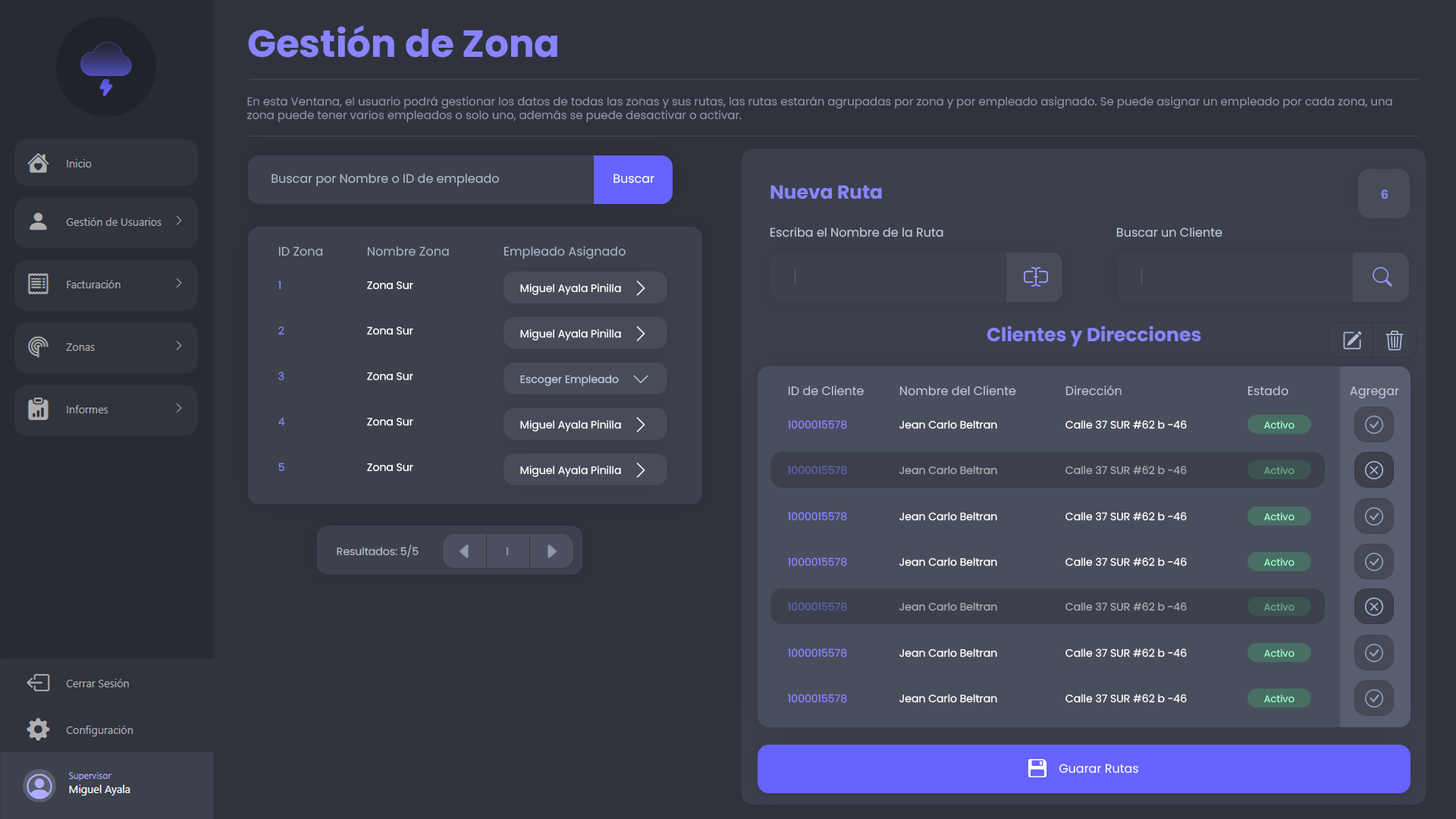
<style>
.page{position:relative;width:1456px;height:819px;background:#30333c}
.page>*{position:absolute;margin:0}
.t1{font:37.9px "Poppins-Bold";color:#8885fe}
.t2{font:11.4px "Poppins-Regular";color:#8c92a6}
.t3{font:12.1px "Poppins-Regular";color:#aeb5c8}
.t4{font:12.1px "Poppins-Regular";color:#ffffff}
.t5{font:19px "Poppins-Bold";color:#8785ff}
.t6{font:12.1px "Poppins-Bold";color:#8683f9}
.t7{font:12.1px "Poppins-Regular";color:#bcc9db}
.t8{font:10.6px "Poppins-Regular";color:#8785ff}
.t9{font:10.6px "Poppins-Regular";color:#ffffff}
.t10{font:10.6px "Poppins-Regular";color:#bcc9db}
.t11{font:9.9px "Poppins-Regular";color:#9fffcf}
.t12{font:10.6px "Poppins-Regular";color:#6161ad}
.t13{font:10.6px "Poppins-Regular";color:#a9aaad}
.t14{font:9.9px "Poppins-Regular";color:#6faa90}
.t15{font:10.6px "Poppins-Regular";color:#aeb5c8}
.t16{font:10.6px "Poppins-Regular";color:#959bac}
</style>
<div class="page">
<p class="t1" style="left:248px;top:25px;width:309px;height:33px">Gestión de Zona</p>
<p class="t2" style="left:246px;top:96px;width:1146px;height:27px">En esta Ventana, el usuario podrá gestionar los datos de todas las zonas y sus rutas, las rutas estarán agrupadas por zona y por empleado asignado. Se puede asignar un empleado por cada zona, una <br>zona puede tener varios empleados o solo uno, además se puede desactivar o activar.</p>
<p class="t3" style="left:271px;top:174px;width:228px;height:13px">Buscar por Nombre o ID de empleado</p>
<p class="t4" style="left:613px;top:174px;width:41px;height:10px">Buscar</p>
<p class="t5" style="left:770px;top:185px;width:112px;height:14px">Nueva Ruta</p>
<p class="t6" style="left:1381px;top:190px;width:7px;height:9px">6</p>
<p class="t7" style="left:770px;top:227px;width:173px;height:10px">Escriba el Nombre de la Ruta</p>
<p class="t7" style="left:1116px;top:227px;width:106px;height:10px">Buscar un Cliente</p>
<p class="t7" style="left:504px;top:246px;width:122px;height:13px">Empleado Asignado</p>
<p class="t7" style="left:278px;top:246px;width:45px;height:10px">ID Zona</p>
<p class="t7" style="left:367px;top:246px;width:82px;height:10px">Nombre Zona</p>
<p class="t8" style="left:278px;top:281px;width:3px;height:9px">1</p>
<p class="t9" style="left:367px;top:281px;width:46px;height:9px">Zona Sur</p>
<p class="t9" style="left:520px;top:284px;width:101px;height:11px">Miguel Ayala Pinilla</p>
<p class="t8" style="left:278px;top:326px;width:6px;height:9px">2</p>
<p class="t9" style="left:367px;top:326px;width:46px;height:9px">Zona Sur</p>
<p class="t9" style="left:520px;top:329px;width:101px;height:11px">Miguel Ayala Pinilla</p>
<p class="t5" style="left:987px;top:326px;width:214px;height:21px">Clientes y Direcciones</p>
<p class="t8" style="left:278px;top:372px;width:6px;height:9px">3</p>
<p class="t9" style="left:367px;top:372px;width:46px;height:9px">Zona Sur</p>
<p class="t10" style="left:520px;top:375px;width:99px;height:11px">Escoger Empleado</p>
<p class="t7" style="left:788px;top:385px;width:76px;height:11px">ID de Cliente</p>
<p class="t7" style="left:899px;top:385px;width:117px;height:11px">Nombre del Cliente</p>
<p class="t7" style="left:1065px;top:385px;width:57px;height:11px">Dirección</p>
<p class="t7" style="left:1247px;top:386px;width:41px;height:10px">Estado</p>
<p class="t7" style="left:1350px;top:386px;width:49px;height:13px">Agregar</p>
<p class="t8" style="left:278px;top:417px;width:7px;height:9px">4</p>
<p class="t9" style="left:367px;top:417px;width:46px;height:9px">Zona Sur</p>
<p class="t9" style="left:520px;top:420px;width:101px;height:11px">Miguel Ayala Pinilla</p>
<p class="t8" style="left:788px;top:420px;width:59px;height:9px">1000015578</p>
<p class="t9" style="left:899px;top:420px;width:98px;height:9px">Jean Carlo Beltran</p>
<p class="t9" style="left:1065px;top:420px;width:122px;height:9px">Calle 37 SUR #62 b -46</p>
<p class="t11" style="left:1264px;top:421px;width:30px;height:8px">Activo</p>
<p class="t8" style="left:278px;top:463px;width:6px;height:9px">5</p>
<p class="t9" style="left:367px;top:463px;width:46px;height:9px">Zona Sur</p>
<p class="t9" style="left:520px;top:466px;width:101px;height:11px">Miguel Ayala Pinilla</p>
<p class="t12" style="left:788px;top:466px;width:59px;height:9px">1000015578</p>
<p class="t13" style="left:899px;top:466px;width:98px;height:9px">Jean Carlo Beltran</p>
<p class="t13" style="left:1065px;top:466px;width:122px;height:9px">Calle 37 SUR #62 b -46</p>
<p class="t14" style="left:1264px;top:466px;width:30px;height:9px">Activo</p>
<p class="t8" style="left:788px;top:512px;width:59px;height:9px">1000015578</p>
<p class="t9" style="left:899px;top:512px;width:98px;height:9px">Jean Carlo Beltran</p>
<p class="t9" style="left:1065px;top:512px;width:122px;height:9px">Calle 37 SUR #62 b -46</p>
<p class="t11" style="left:1264px;top:513px;width:30px;height:8px">Activo</p>
<p class="t15" style="left:337px;top:544px;width:82px;height:13px">Resultados: 5/5</p>
<p class="t16" style="left:506px;top:547px;width:3px;height:9px">1</p>
<p class="t8" style="left:788px;top:557px;width:59px;height:9px">1000015578</p>
<p class="t9" style="left:899px;top:557px;width:98px;height:9px">Jean Carlo Beltran</p>
<p class="t9" style="left:1065px;top:557px;width:122px;height:9px">Calle 37 SUR #62 b -46</p>
<p class="t11" style="left:1264px;top:558px;width:30px;height:8px">Activo</p>
<p class="t12" style="left:788px;top:602px;width:59px;height:9px">1000015578</p>
<p class="t13" style="left:899px;top:602px;width:98px;height:9px">Jean Carlo Beltran</p>
<p class="t13" style="left:1065px;top:602px;width:122px;height:9px">Calle 37 SUR #62 b -46</p>
<p class="t14" style="left:1264px;top:603px;width:30px;height:8px">Activo</p>
<p class="t8" style="left:788px;top:648px;width:59px;height:9px">1000015578</p>
<p class="t9" style="left:899px;top:648px;width:98px;height:9px">Jean Carlo Beltran</p>
<p class="t9" style="left:1065px;top:648px;width:122px;height:9px">Calle 37 SUR #62 b -46</p>
<p class="t11" style="left:1264px;top:649px;width:30px;height:8px">Activo</p>
<p class="t8" style="left:788px;top:694px;width:59px;height:9px">1000015578</p>
<p class="t9" style="left:899px;top:694px;width:98px;height:9px">Jean Carlo Beltran</p>
<p class="t9" style="left:1065px;top:694px;width:122px;height:9px">Calle 37 SUR #62 b -46</p>
<p class="t11" style="left:1264px;top:695px;width:30px;height:8px">Activo</p>
<p class="t4" style="left:1059px;top:764px;width:79px;height:9px">Guarar Rutas</p>
</div>
